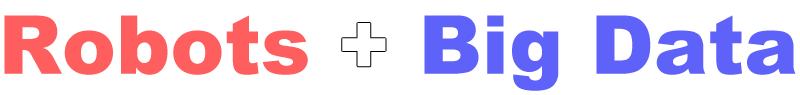
<style>
.page{position:relative;width:800px;height:95px;background:#ffffff}
.page>*{position:absolute;margin:0}
.t1{font:81.5px "Arial-Black";color:#ff5e5e}
.t2{font:81.5px "Arial-Black";color:#5f62f9}
</style>
<div class="page">
<p class="t1" style="left:4px;top:15px;width:304px;height:60px">Robots</p>
<p class="t2" style="left:424px;top:15px;width:372px;height:76px">Big Data</p>
</div>
